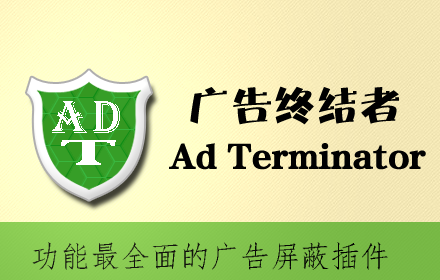
<style>
.page{position:relative;width:440px;height:280px}
.page>*{position:absolute;margin:0}
.t1{font:42.9px "FZTCGHJW--GB1-0";color:#010101}
.t2{font:36px "FZTCGHJW--GB1-0";color:#010101}
.t3{font:30px "·ÂËÎ";color:#010101}
</style>
<div class="page">
<p class="t1" style="left:190px;top:86px;width:209px;height:39px">广告终结者</p>
<p class="t2" style="left:169px;top:143px;width:257px;height:27px">Ad Terminator</p>
<p class="t3" style="left:32px;top:242px;width:356px;height:28px">功能最全面的广告屏蔽插件</p>
</div>
